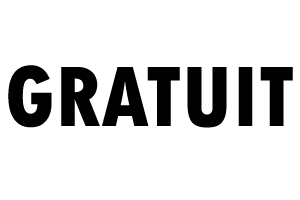
<style>
.page{position:relative;width:300px;height:200px;background:#ffffff}
.page>*{position:absolute;margin:0}
.t1{font:90.1px "TwCenMT-CondensedExtraBold";color:#000000}
</style>
<div class="page">
<p class="t1" style="left:8px;top:65px;width:285px;height:63px">GRATUIT</p>
</div>
